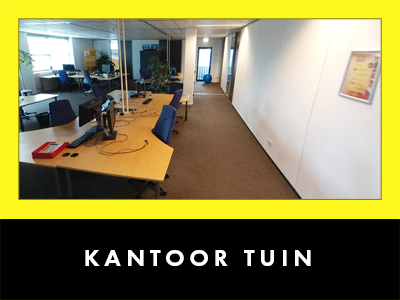
<style>
.page{position:relative;width:400px;height:300px;background:#000000}
.page>*{position:absolute;margin:0}
.t1{font:24px "FuturaPT-Heavy";letter-spacing:0.2em;color:#ffffff;text-transform:uppercase}
</style>
<div class="page">
<p class="t1" style="left:85px;top:250px;width:226px;height:16px">kantoor tuin</p>
</div>
